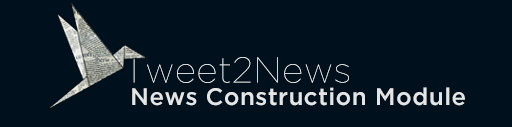
<style>
.page{position:relative;width:512px;height:127px;background:#00101c}
.page>*{position:absolute;margin:0}
.t1{font:24px "GothamMedium";letter-spacing:0.019em;color:#e5e5e5}
</style>
<div class="page">
<p class="t1" style="left:132px;top:87px;width:333px;height:19px">News Construction Module</p>
</div>
